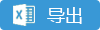
<style>
.page{position:relative;width:100px;height:30px;background:#3998d6}
.page>*{position:absolute;margin:0}
.t1{font:18px "MicrosoftYaHei";color:#ffffff}
</style>
<div class="page">
<p class="t1" style="left:47px;top:7px;width:35px;height:17px">导出</p>
</div>
